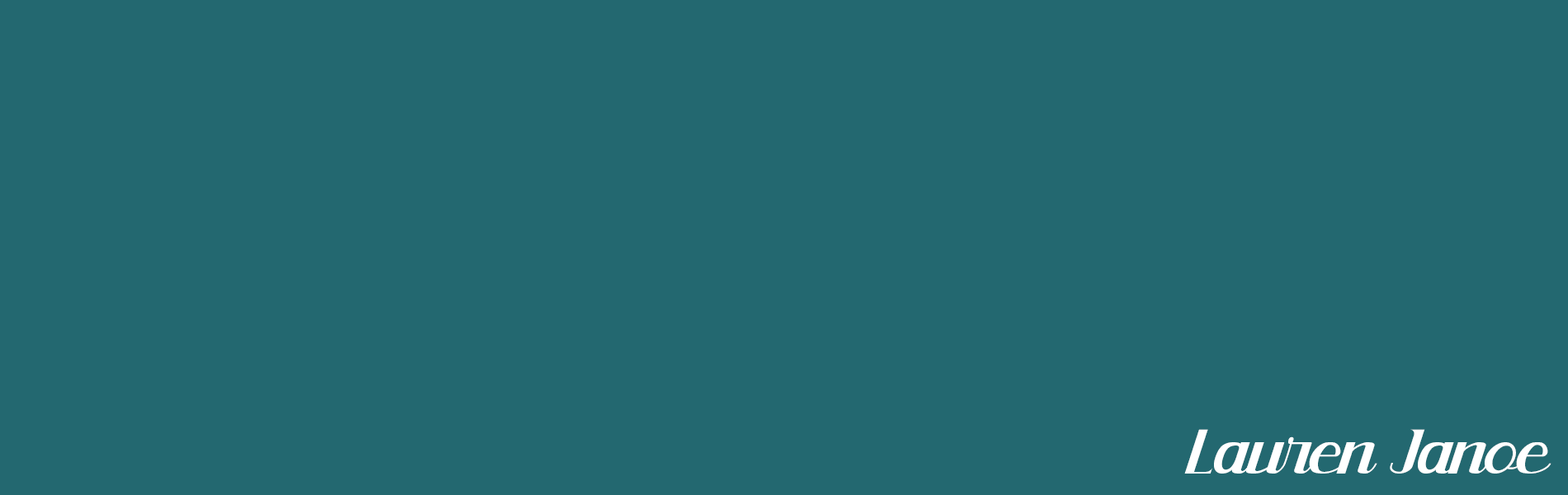
<style>
.page{position:relative;width:1568px;height:495px;background:#236870}
.page>*{position:absolute;margin:0}
.t1{font:51.6px "LalyttaRegular";color:#ffffff}
</style>
<div class="page">
<p class="t1" style="left:1184px;top:429px;width:367px;height:45px">Lauren Janoe</p>
</div>
